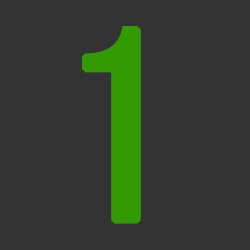
<style>
.page{position:relative;width:250px;height:250px;background:#333333}
.page>*{position:absolute;margin:0}
.t1{font:250px "MS-Gothic";color:#339900;font-weight:bold}
</style>
<div class="page">
<p class="t1" style="left:82px;top:26px;width:59px;height:198px">1</p>
</div>
